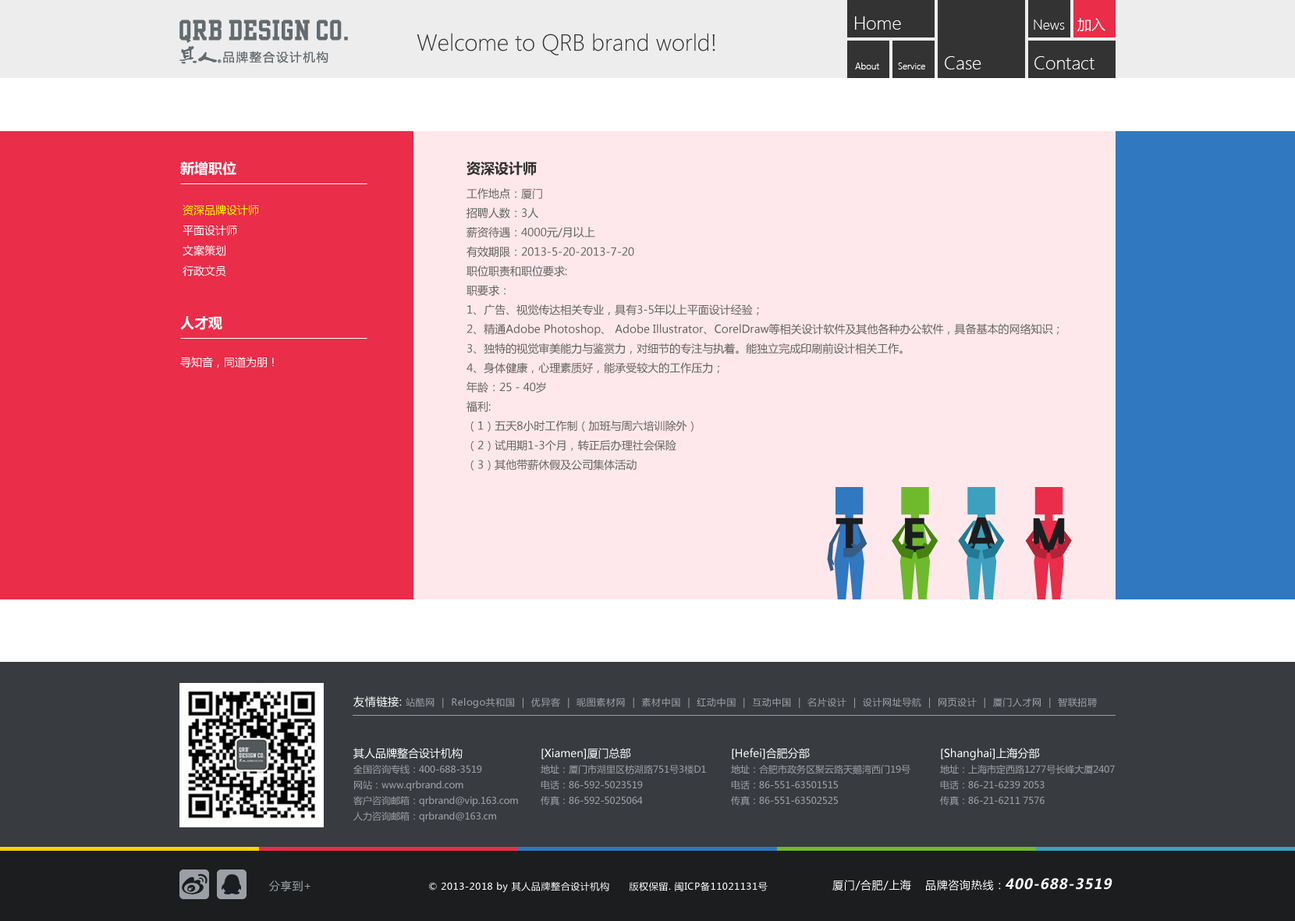
<style>
.page{position:relative;width:1295px;height:921px;background:#ffe8eb}
.page>*{position:absolute;margin:0}
.t1{font:18.7px "SegoeUI-Light";color:#ffffff}
.t2{font:14px "MicrosoftYaHei";color:#ffffff}
.t3{font:14px "SegoeUI-Light";color:#ffffff}
.t4{font:23.4px "SegoeUI-Light";color:#333333}
.t5{font:9.4px "SegoeUI-Light";color:#ffffff}
.t6{font:14px "MicrosoftYaHei-Bold";color:#ffffff}
.t7{font:14px "MicrosoftYaHei-Bold";color:#333333}
.t8{font:10.9px/19.3px "MicrosoftYaHei";color:#646464}
.t9{font:10.9px/20.3px "MicrosoftYaHei";color:#ffffff}
.t10{font:10.9px/20.3px "MicrosoftYaHei";color:#ffff00}
.t11{font:10.9px "MicrosoftYaHei";color:#ffffff}
.t12{font:9.4px "MicrosoftYaHei";letter-spacing:0.05em;color:#9ba0a7}
.t13{font:10.9px "MicrosoftYaHei";letter-spacing:0.05em;color:#ffffff}
.t14{font:9.4px/15.6px "MicrosoftYaHei";color:#9ba0a7}
.t15{font:10.9px/15.6px "MicrosoftYaHei";color:#ffffff}
.t16{font:10.9px "MicrosoftYaHei";letter-spacing:0.05em;color:#9ba0a7}
.t17{font:9.4px "MicrosoftYaHei";letter-spacing:0.05em;color:#ffffff}
.t18{font:14px "MicrosoftYaHei-Bold";letter-spacing:0.05em;color:#ffffff;font-style:italic}
</style>
<div class="page">
<p class="t1" style="left:855px;top:16px;width:46px;height:14px">Home</p>
<p class="t2" style="left:1077px;top:18px;width:29px;height:14px">加入</p>
<p class="t3" style="left:1034px;top:20px;width:31px;height:10px">News</p>
<p class="t4" style="left:417px;top:33px;width:298px;height:22px">Welcome to QRB brand world!</p>
<p class="t5" style="left:855px;top:62px;width:24px;height:7px">About</p>
<p class="t5" style="left:898px;top:62px;width:27px;height:7px">Service</p>
<p class="t1" style="left:945px;top:56px;width:37px;height:13px">Case</p>
<p class="t1" style="left:1035px;top:56px;width:60px;height:13px">Contact</p>
<p class="t6" style="left:180px;top:162px;width:56px;height:14px">新增职位</p>
<p class="t7" style="left:467px;top:162px;width:70px;height:14px">资深设计师</p>
<p class="t8" style="left:467px;top:188px;width:593px;height:282px;text-align:justify">工作地点：厦门<br>招聘人数：3人<br>薪资待遇：4000元/月以上<br>有效期限：2013-5-20-2013-7-20<br>职位职责和职位要求:<br>职要求：<br>1、广告、视觉传达相关专业，具有3-5年以上平面设计经验；<br>2、精通Adobe Photoshop、 Adobe Illustrator、CorelDraw等相关设计软件及其他各种办公软件，具备基本的网络知识；<br>3、独特的视觉审美能力与鉴赏力，对细节的专注与执着。能独立完成印刷前设计相关工作。<br>4、身体健康，心理素质好，能承受较大的工作压力；<br>年龄：25－40岁<br>福利:<br>（1）五天8小时工作制（加班与周六培训除外）<br>（2）试用期1-3个月，转正后办理社会保险<br>（3）其他带薪休假及公司集体活动</p>
<p class="t9" style="left:183px;top:204px;width:76px;height:72px"><span class="t10">资深品牌设计师<br></span>平面设计师<br>文案策划<br>行政文员</p>
<p class="t6" style="left:180px;top:316px;width:42px;height:14px">人才观</p>
<p class="t11" style="left:180px;top:357px;width:94px;height:10px">寻知音，同道为朋！</p>
<p class="t12" style="left:353px;top:696px;width:744px;height:12px"><span class="t13">友情链接: </span>站酷网  |  Relogo共和国  |  优异客  |  昵图素材网  |  素材中国  |  红动中国  |  互动中国  |  名片设计  |  设计网址导航  |  网页设计  |  厦门人才网  |  智联招聘</p>
<p class="t14" style="left:353px;top:747px;width:165px;height:75px"><span class="t15">其人品牌整合设计机构<br></span>全国咨询专线：400-688-3519<br>网站：www.qrbrand.com<br>客户咨询邮箱：qrbrand@vip.163.com<br>人力咨询邮箱：qrbrand@163.cm</p>
<p class="t14" style="left:541px;top:747px;width:165px;height:58px"><span class="t15">[Xiamen]厦门总部<br></span>地址：厦门市湖里区枋湖路751号3楼D1<br>电话：86-592-5023519<br>传真：86-592-5025064</p>
<p class="t14" style="left:731px;top:747px;width:180px;height:58px"><span class="t15">[Hefei]合肥分部<br></span>地址：合肥市政务区聚云路天鹅湾西门19号<br>电话：86-551-63501515<br>传真：86-551-63502525</p>
<p class="t14" style="left:940px;top:747px;width:175px;height:58px"><span class="t15">[Shanghai]上海分部<br></span>地址：上海市定西路1277号长峰大厦2407<br>电话：86-21-6239 2053<br>传真：86-21-6211 7576</p>
<p class="t16" style="left:269px;top:880px;width:42px;height:11px">分享到+</p>
<p class="t17" style="left:429px;top:881px;width:339px;height:11px">© 2013-2018 by 其人品牌整合设计机构      版权保留. 闽ICP备11021131号</p>
<p class="t13" style="left:833px;top:879px;width:78px;height:11px">厦门/合肥/上海</p>
<p class="t13" style="left:926px;top:879px;width:75px;height:11px">品牌咨询热线：</p>
<p class="t18" style="left:1006px;top:878px;width:107px;height:11px">400-688-3519</p>
</div>
